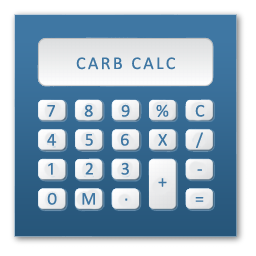
<style>
.page{position:relative;width:256px;height:256px}
.page>*{position:absolute;margin:0}
.t1{font:18px "Calibri";letter-spacing:0.13em;color:#3f77a3}
.t2{font:18px "Calibri";letter-spacing:0.13em}
</style>
<div class="page">
<p class="t1" style="left:76px;top:57px;width:99px;height:13px">CARB CALC</p>
<p class="t1" style="left:47px;top:105px;width:8px;height:12px">7</p>
<p class="t1" style="left:84px;top:104px;width:9px;height:13px">8</p>
<p class="t1" style="left:121px;top:104px;width:9px;height:13px">9</p>
<p class="t1" style="left:156px;top:104px;width:13px;height:13px">%</p>
<p class="t1" style="left:195px;top:104px;width:10px;height:13px">C</p>
<p class="t1" style="left:47px;top:134px;width:10px;height:12px">4</p>
<p class="t1" style="left:85px;top:134px;width:8px;height:12px">5</p>
<p class="t1" style="left:121px;top:133px;width:8px;height:13px">6</p>
<p class="t1" style="left:158px;top:134px;width:9px;height:12px">X</p>
<p class="t1" style="left:196px;top:132px;width:7px;height:16px">/</p>
<p class="t1" style="left:48px;top:163px;width:5px;height:12px">1</p>
<p class="t1" style="left:85px;top:162px;width:8px;height:13px">2</p>
<p class="t1" style="left:121px;top:162px;width:8px;height:13px">3</p>
<p class="t2" style="left:197px;top:169px;width:5px;height:2px">-</p>
<p class="t1" style="left:158px;top:178px;width:9px;height:9px">+</p>
<p class="t1" style="left:47px;top:192px;width:10px;height:13px">0</p>
<p class="t1" style="left:82px;top:193px;width:13px;height:12px">M</p>
<p class="t1" style="left:125px;top:198px;width:3px;height:3px">.</p>
<p class="t1" style="left:195px;top:197px;width:9px;height:5px">=</p>
</div>
